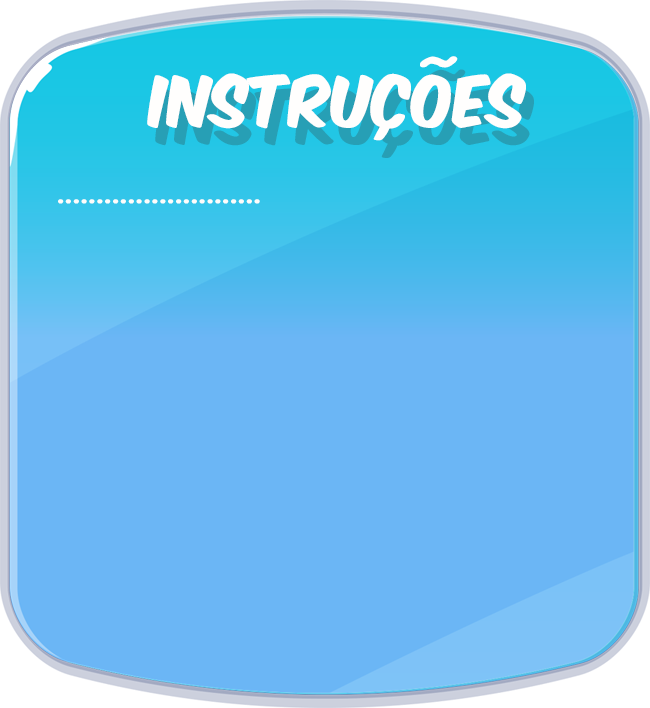
<style>
.page{position:relative;width:650px;height:708px;background:#6bb6f5}
.page>*{position:absolute;margin:0}
.t1{font:60.5px "KomikaAxis";color:#fffefd}
.t2{font:63.9px "KomikaAxis";scale:0.95 1}
.t3{font:23.8px "KomikaAxis";color:#fefdfb}
</style>
<div class="page">
<p class="t1" style="left:147px;top:56px;width:379px;height:85px">INSTRUÇÕES</p>
<p class="t2" style="left:155px;top:69px;width:379px;height:89px">INSTRUÇÕES</p>
<p class="t3" style="left:58px;top:199px;width:202px;height:5px">..........................</p>
</div>
